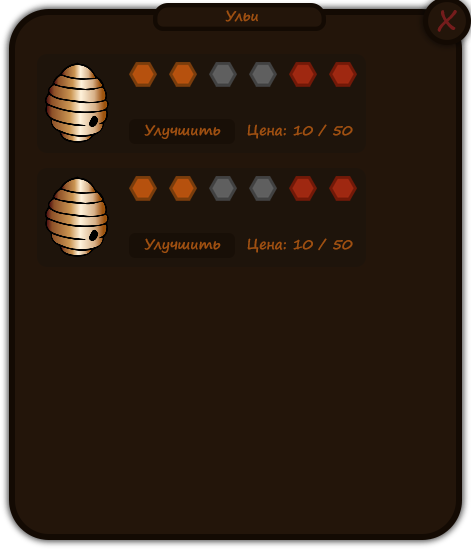
<style>
.page{position:relative;width:471px;height:549px;background:#23150a}
.page>*{position:absolute;margin:0}
.t1{font:14px "SegoePrint-Bold";color:#9f5011}
.t2{font:36px "SegoePrint";color:#751c1c}
</style>
<div class="page">
<p class="t1" style="left:225px;top:10px;width:33px;height:12px">Ульи</p>
<p class="t2" style="left:437px;top:10px;width:20px;height:22px">x</p>
<p class="t1" style="left:144px;top:124px;width:77px;height:15px">Улучшить</p>
<p class="t1" style="left:247px;top:124px;width:106px;height:15px">Цена: 10 / 50</p>
<p class="t1" style="left:144px;top:238px;width:77px;height:15px">Улучшить</p>
<p class="t1" style="left:247px;top:238px;width:106px;height:15px">Цена: 10 / 50</p>
</div>
